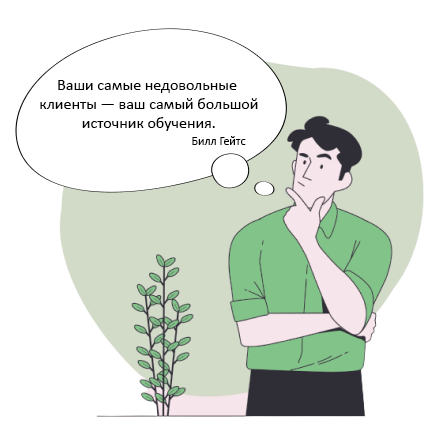
<style>
.page{position:relative;width:443px;height:435px;background:#ffffff}
.page>*{position:absolute;margin:0}
.t1{font:16px "Calibri";color:#000000}
.t2{font:12px "Calibri";color:#000000}
</style>
<div class="page">
<p class="t1" style="left:40px;top:80px;width:218px;height:51px;text-align:center">Ваши самые недовольные<br> клиенты — ваш самый большой<br> источник обучения.</p>
<p class="t2" style="left:192px;top:136px;width:54px;height:9px">Билл Гейтс</p>
</div>
